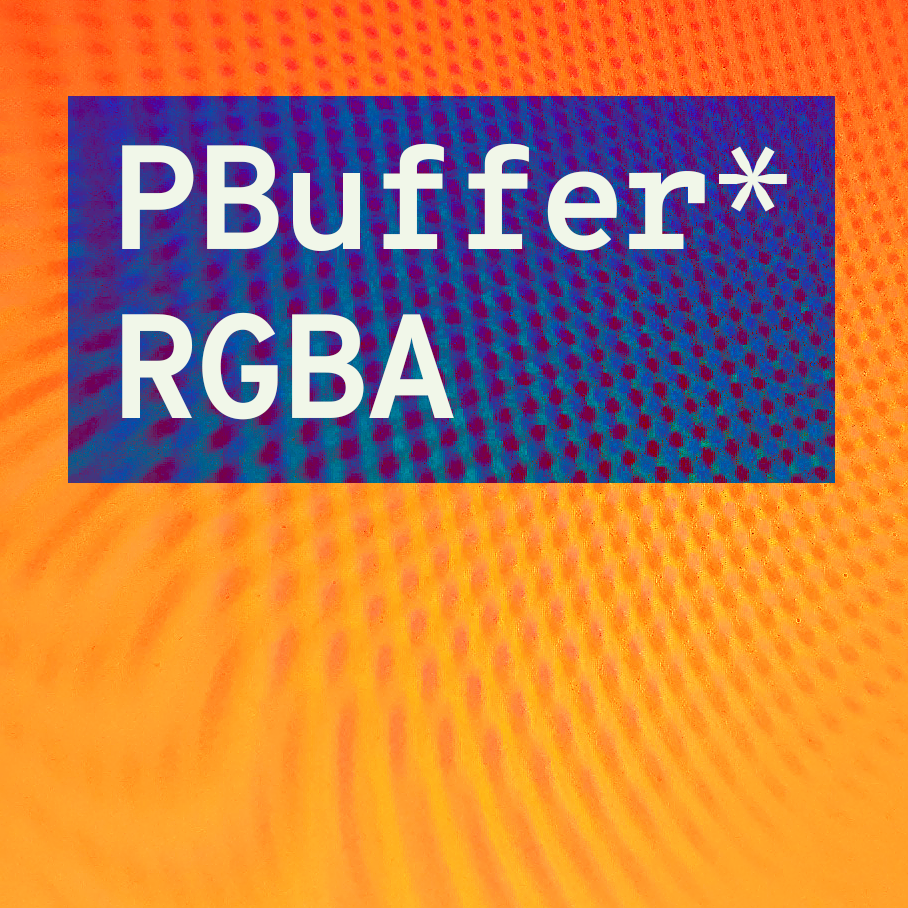
<style>
.page{position:relative;width:908px;height:908px}
.page>*{position:absolute;margin:0}
.t1{font:147.9px/169.1px "OverpassMono-Bold";letter-spacing:-0.04em;color:#f1f7e9}
.t2{font:147.9px/162.4px "OverpassMono-Light";letter-spacing:-0.04em;color:#f1f7e9}
</style>
<div class="page">
<p class="t1" style="left:122px;top:143px;width:665px;height:277px">PBuffer<span class="t2">*<br></span>RGBA</p>
</div>
